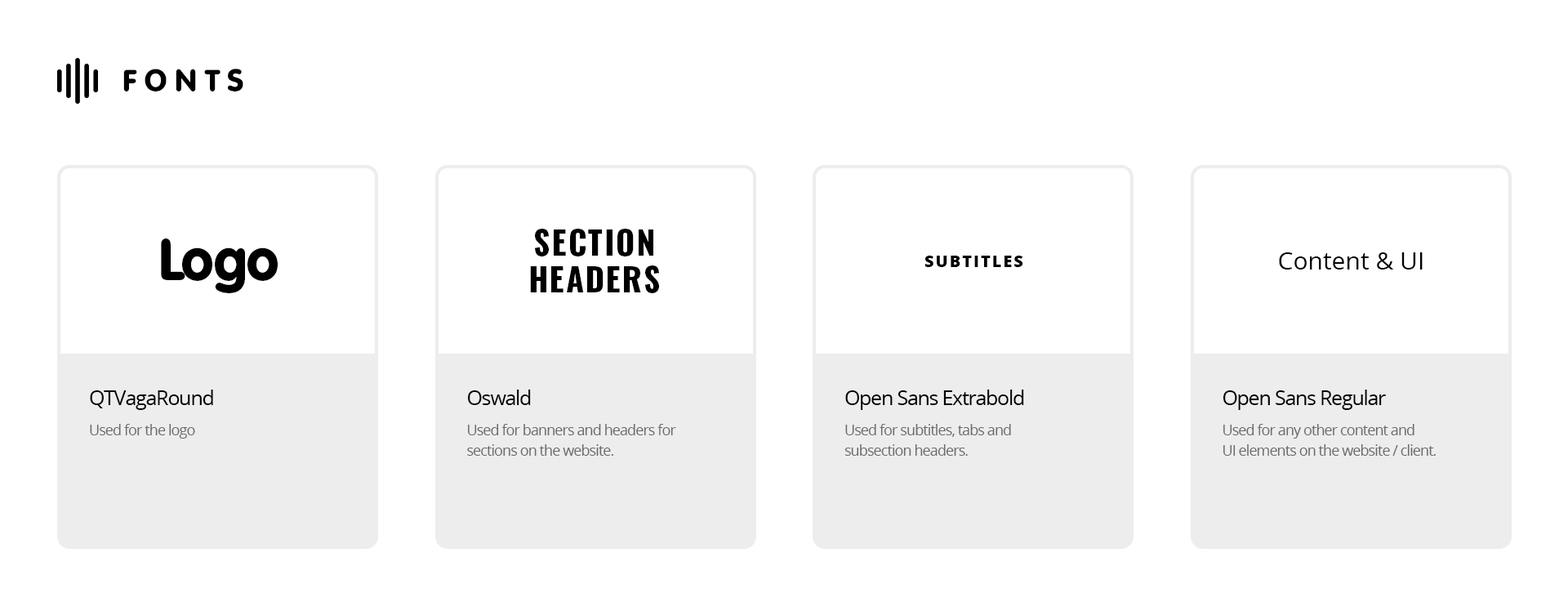
<style>
.page{position:relative;width:1568px;height:606px;background:#ffffff}
.page>*{position:absolute;margin:0}
.t1{font:32.7px "QTVagaRound-Bold";letter-spacing:0.2em;color:#000000}
.t2{font:32.7px/36.8px "Oswald-Bold";letter-spacing:0.05em;color:#000000}
.t3{font:61.2px "QTVagaRound-Bold";letter-spacing:-0.05em;color:#000000}
.t4{font:16.3px "OpenSans-Extrabold";letter-spacing:0.1em;color:#000000}
.t5{font:24.5px "OpenSans";color:#000000}
.t6{font:20.4px "OpenSans";letter-spacing:-0.05em;color:#000000}
.t7{font:14.7px "OpenSans";letter-spacing:-0.05em;color:#6b6b6b}
.t8{font:14.7px/20.4px "OpenSans";letter-spacing:-0.05em;color:#6b6b6b}
</style>
<div class="page">
<p class="t1" style="left:123px;top:69px;width:120px;height:22px">FONTS</p>
<p class="t2" style="left:530px;top:229px;width:129px;height:64px;text-align:center">SECTION<br>HEADERS</p>
<p class="t3" style="left:161px;top:238px;width:117px;height:55px">Logo</p>
<p class="t4" style="left:924px;top:256px;width:99px;height:11px">SUBTITLES</p>
<p class="t5" style="left:1279px;top:252px;width:144px;height:18px">Content &amp; UI</p>
<p class="t6" style="left:90px;top:390px;width:123px;height:20px">QTVagaRound</p>
<p class="t6" style="left:467px;top:390px;width:64px;height:15px">Oswald</p>
<p class="t6" style="left:845px;top:390px;width:179px;height:20px">Open Sans Extrabold</p>
<p class="t6" style="left:1223px;top:390px;width:163px;height:20px">Open Sans Regular</p>
<p class="t7" style="left:90px;top:424px;width:105px;height:15px">Used for the logo</p>
<p class="t8" style="left:467px;top:424px;width:209px;height:32px">Used for banners and headers for<br>sections on the website.</p>
<p class="t8" style="left:844px;top:424px;width:167px;height:32px">Used for subtitles, tabs and<br>subsection headers.</p>
<p class="t8" style="left:1223px;top:424px;width:213px;height:32px">Used for any other content and<br>UI elements on the website / client.</p>
</div>
